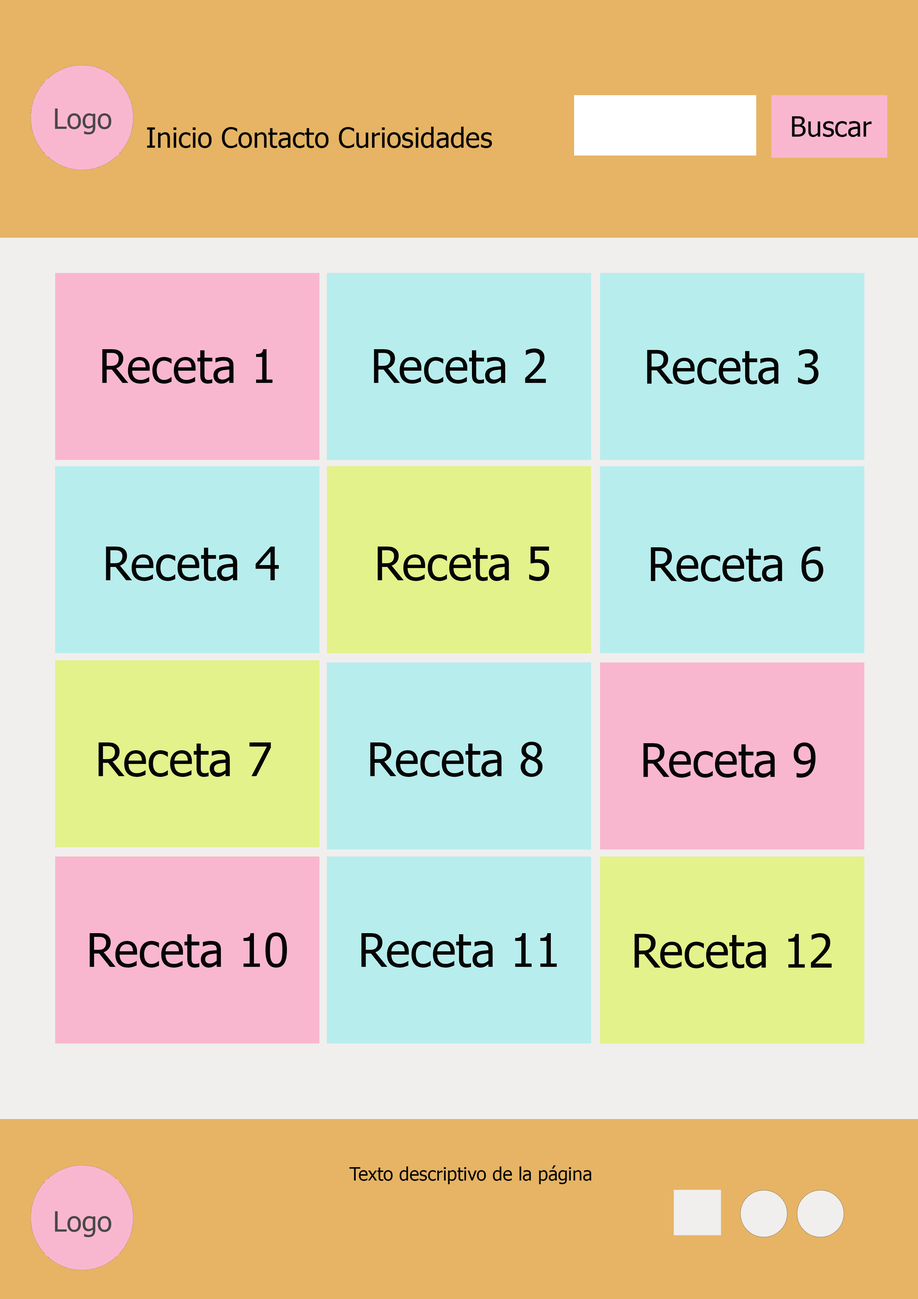
<style>
.page{position:relative;width:918px;height:1299px;background:#e6b464}
.page>*{position:absolute;margin:0}
.t1{font:27.8px "Tahoma";color:#494747}
.t2{font:27.8px "Tahoma";color:#040404}
.t3{font:46.3px "Tahoma";color:#040404}
.t4{font:18.5px "Tahoma";color:#040404}
</style>
<div class="page">
<p class="t1" style="left:55px;top:108px;width:56px;height:26px">Logo</p>
<p class="t2" style="left:792px;top:116px;width:80px;height:21px">Buscar</p>
<p class="t2" style="left:147px;top:127px;width:345px;height:21px">Inicio Contacto Curiosidades</p>
<p class="t3" style="left:102px;top:349px;width:171px;height:35px">Receta 1</p>
<p class="t3" style="left:374px;top:348px;width:172px;height:36px">Receta 2</p>
<p class="t3" style="left:647px;top:349px;width:172px;height:35px">Receta 3</p>
<p class="t3" style="left:106px;top:546px;width:173px;height:35px">Receta 4</p>
<p class="t3" style="left:378px;top:546px;width:171px;height:35px">Receta 5</p>
<p class="t3" style="left:651px;top:546px;width:173px;height:36px">Receta 6</p>
<p class="t3" style="left:98px;top:742px;width:173px;height:35px">Receta 7</p>
<p class="t3" style="left:370px;top:742px;width:173px;height:35px">Receta 8</p>
<p class="t3" style="left:643px;top:742px;width:173px;height:35px">Receta 9</p>
<p class="t3" style="left:90px;top:932px;width:197px;height:35px">Receta 10</p>
<p class="t3" style="left:361px;top:933px;width:196px;height:34px">Receta 11</p>
<p class="t3" style="left:635px;top:933px;width:197px;height:35px">Receta 12</p>
<p class="t4" style="left:349px;top:1165px;width:243px;height:19px">Texto descriptivo de la página</p>
<p class="t1" style="left:55px;top:1211px;width:56px;height:26px">Logo</p>
</div>
